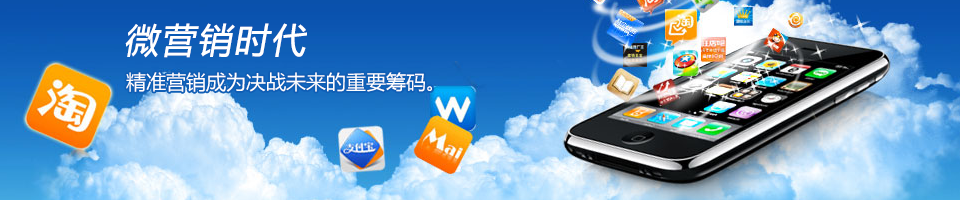
<style>
.page{position:relative;width:960px;height:200px}
.page>*{position:absolute;margin:0}
.t1{font:34.1px "MicrosoftYaHei";letter-spacing:0.05em;color:#ffffff;font-weight:bold;font-style:italic}
.t2{font:19.8px "MicrosoftYaHei";color:#ffffff}
</style>
<div class="page">
<p class="t1" style="left:125px;top:23px;width:182px;height:35px">微营销时代</p>
<p class="t2" style="left:126px;top:72px;width:306px;height:20px">精准营销成为决战未来的重要筹码。</p>
</div>
